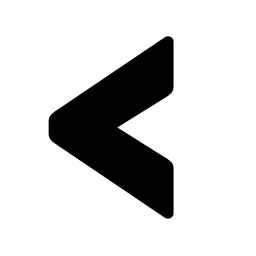
<style>
.page{position:relative;width:256px;height:256px;background:#ffffff}
.page>*{position:absolute;margin:0}
.t1{font:271.5px "Rubik-Black";letter-spacing:0.01em;color:#000000}
</style>
<div class="page">
<p class="t1" style="left:48px;top:36px;width:126px;height:183px">&lt;</p>
</div>
